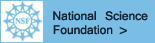
<style>
.page{position:relative;width:155px;height:43px;background:#7abee6}
.page>*{position:absolute;margin:0}
.t1{font:19px "Kartika";color:#142230}
.t2{font:24px "Kartika";color:#142230}
</style>
<div class="page">
<p class="t1" style="left:53px;top:11px;width:95px;height:10px">National Science</p>
<p class="t1" style="left:53px;top:25px;width:60px;height:10px">Foundation</p>
<p class="t2" style="left:119px;top:27px;width:8px;height:8px">&gt;</p>
</div>
